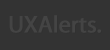
<style>
.page{position:relative;width:110px;height:50px;background:#333333}
.page>*{position:absolute;margin:0}
.t1{font:24px "MyriadPro-Regular";letter-spacing:-0.02em;color:#444444;font-weight:bold}
</style>
<div class="page">
<p class="t1" style="left:9px;top:15px;width:92px;height:18px">UXAlerts.</p>
</div>
